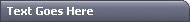
<style>
.page{position:relative;width:190px;height:22px}
.page>*{position:absolute;margin:0}
.t1{font:11px "Tahoma-Bold";color:#ffffff}
</style>
<div class="page">
<p class="t1" style="left:7px;top:7px;width:86px;height:8px">Text Goes Here</p>
</div>
